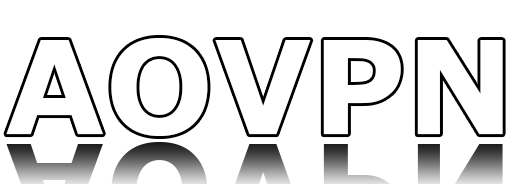
<style>
.page{position:relative;width:510px;height:184px;background:#ffffff}
.page>*{position:absolute;margin:0}
.t1{font:128.6px "Verdana-Bold";color:#ffffff}
</style>
<div class="page">
<p class="t1" style="left:6px;top:38px;width:497px;height:98px">AOVPN</p>
</div>
